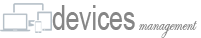
<style>
.page{position:relative;width:201px;height:38px;background:#ffffff}
.page>*{position:absolute;margin:0}
.t1{font:35.4px "ArialMT";color:#868686;scale:0.69 1}
.t2{font:24px "EdwardianScriptITC";color:#868686;scale:0.67 1}
</style>
<div class="page">
<p class="t1" style="left:52px;top:5px;width:83px;height:25px">devices</p>
<p class="t2" style="left:139px;top:21px;width:58px;height:17px">management</p>
</div>
